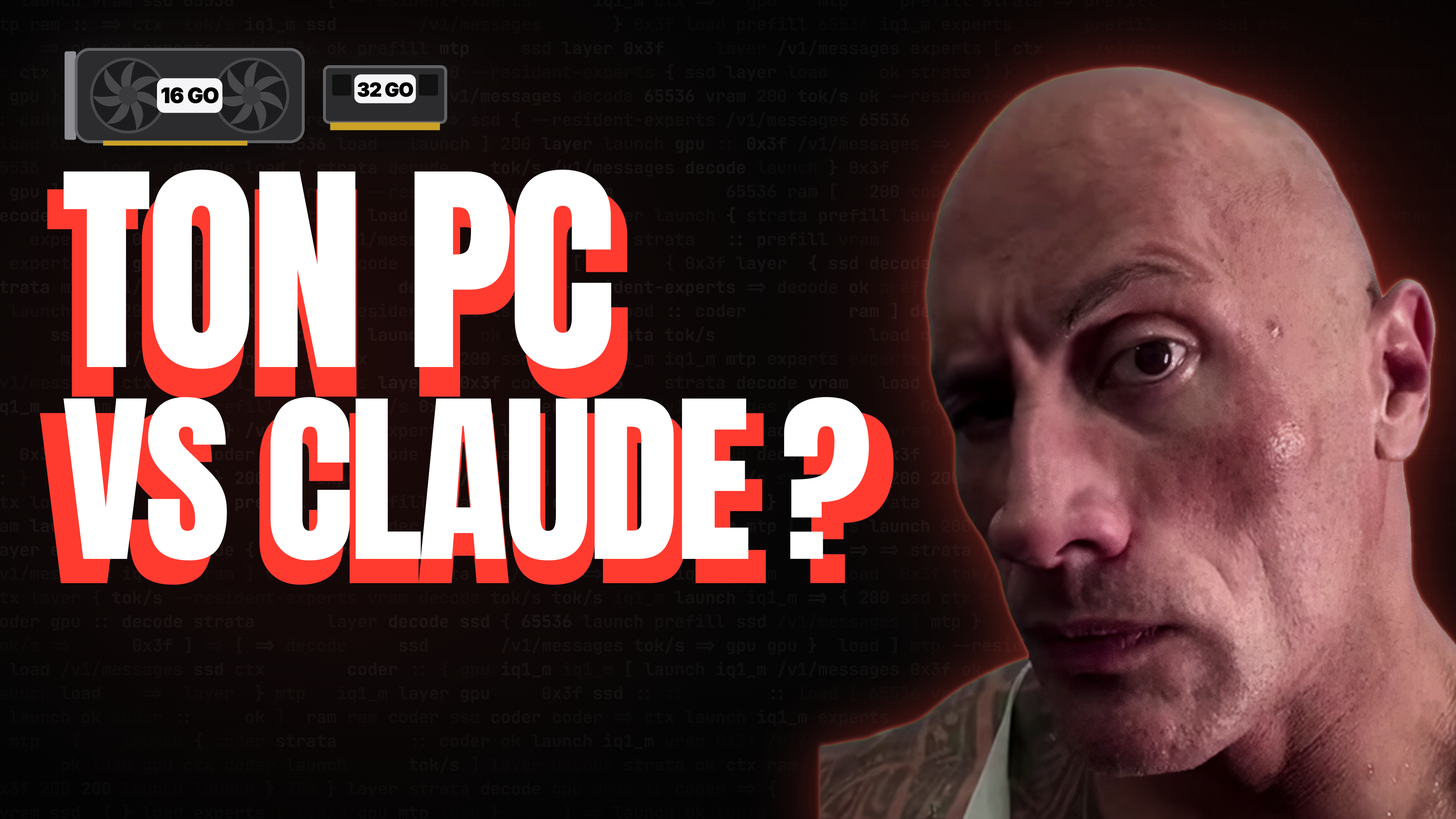
<style>
.page{position:relative;width:1456px;height:819px}
.page>*{position:absolute;margin:0}
.t1{font:227.5px "Anton-Regular";letter-spacing:-0.025em;color:#ffffff}
.t2{font:241.1px "Anton-Regular";letter-spacing:-0.025em}
.t3{font:186.5px "Anton-Regular";letter-spacing:-0.025em;color:#ffffff}
.t4{font:197.7px "Anton-Regular";letter-spacing:-0.025em}
</style>
<div class="page">
<p class="t1" style="left:63px;top:169px;width:549px;height:200px">TON PC</p>
<p class="t2" style="left:47px;top:187px;width:581px;height:212px">TON PC</p>
<p class="t3" style="left:63px;top:397px;width:806px;height:164px">VS CLAUDE ?</p>
<p class="t4" style="left:39px;top:411px;width:855px;height:174px">VS CLAUDE ?</p>
</div>
